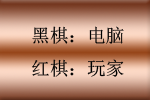
<style>
.page{position:relative;width:150px;height:100px}
.page>*{position:absolute;margin:0}
.t1{font:18.7px "SimSun";color:#000000}
</style>
<div class="page">
<p class="t1" style="left:32px;top:26px;width:92px;height:51px">黑棋：电脑<br>红棋：玩家</p>
</div>
